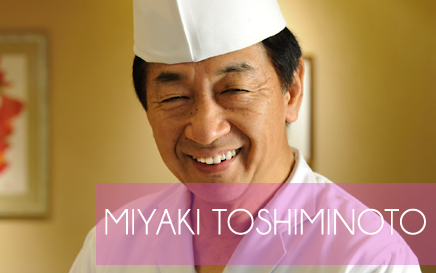
<style>
.page{position:relative;width:436px;height:273px}
.page>*{position:absolute;margin:0}
.t1{font:36px "Champagne&Limousines";color:#ffffff;font-weight:bold}
</style>
<div class="page">
<p class="t1" style="left:105px;top:208px;width:321px;height:27px">MIYAKI TOSHIMINOTO</p>
</div>
